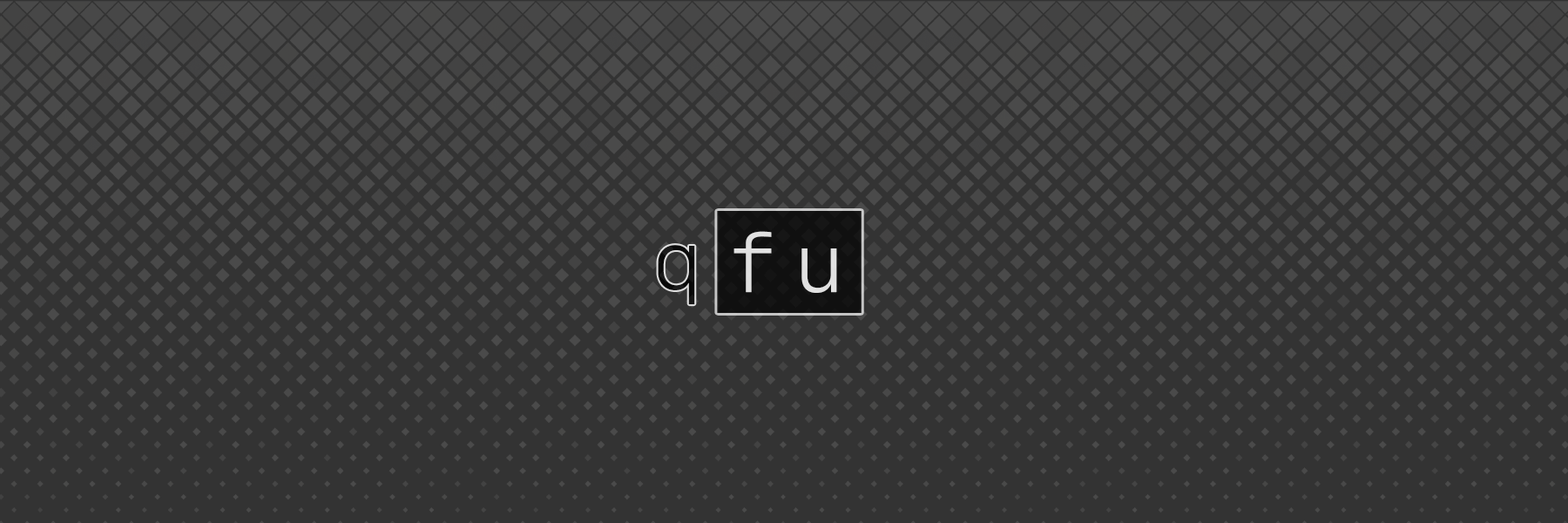
<style>
.page{position:relative;width:1568px;height:523px;background:#333333}
.page>*{position:absolute;margin:0}
.t1{font:82.6px "SFMono-Light";letter-spacing:0.2em;color:#e0e0e0}
.t2{font:82.6px "SFMono-Light";letter-spacing:0.2em;color:#000000}
</style>
<div class="page">
<p class="t1" style="left:733px;top:231px;width:104px;height:62px">fu</p>
<p class="t2" style="left:658px;top:245px;width:37px;height:60px;opacity:0.83">q</p>
</div>
